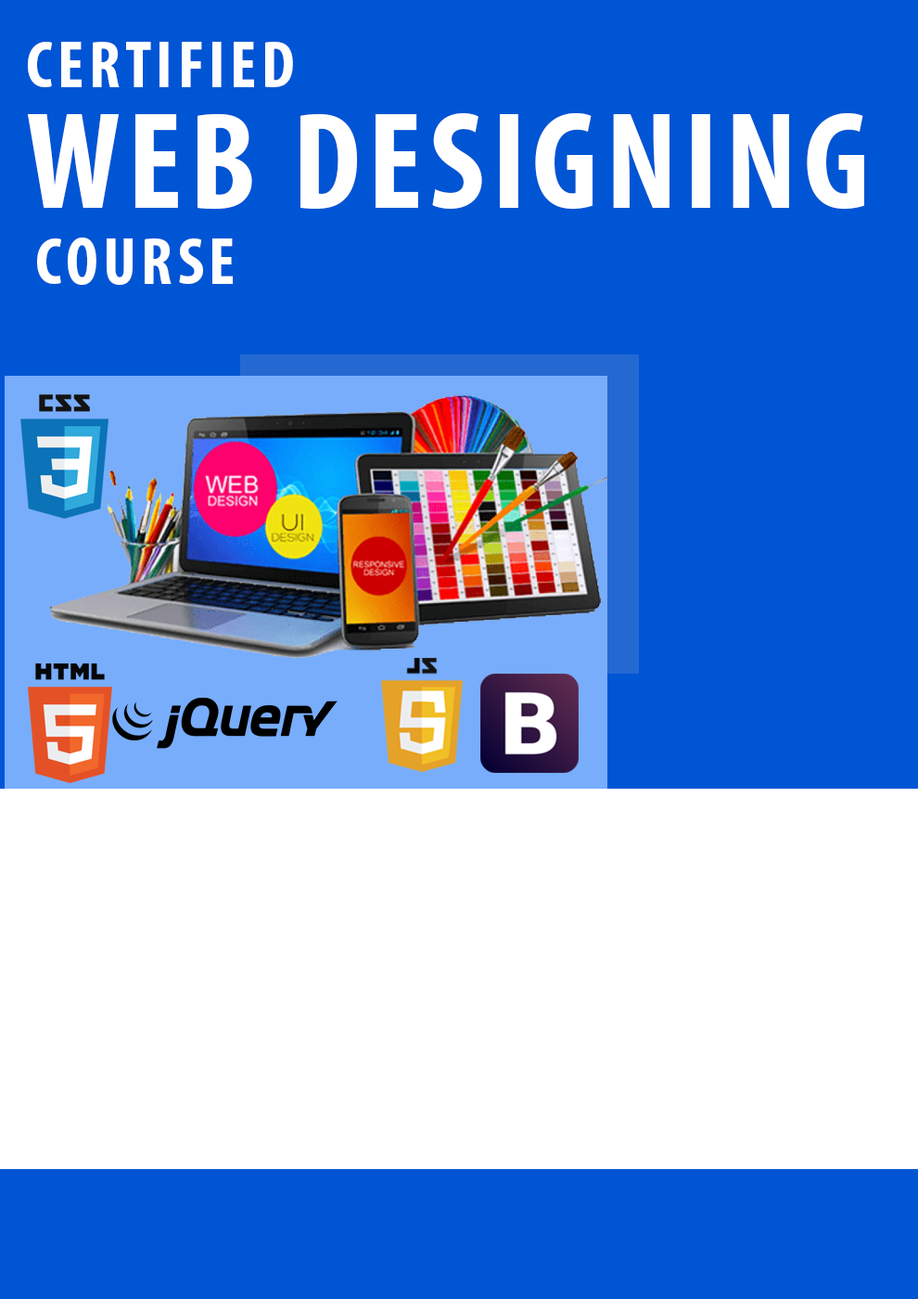
<style>
.page{position:relative;width:918px;height:1299px;background:#0055d4}
.page>*{position:absolute;margin:0}
.t1{font:66.8px "MyriadPro-BoldCond";letter-spacing:0.075em;color:#ffffff;text-transform:uppercase}
.t2{font:139.1px "MyriadPro-BoldCond";letter-spacing:0.05em;color:#ffffff;text-transform:uppercase}
</style>
<div class="page">
<p class="t1" style="left:28px;top:42px;width:265px;height:45px">certified</p>
<p class="t2" style="left:28px;top:112px;width:836px;height:98px">Web designing</p>
<p class="t1" style="left:37px;top:237px;width:196px;height:48px">course</p>
</div>
